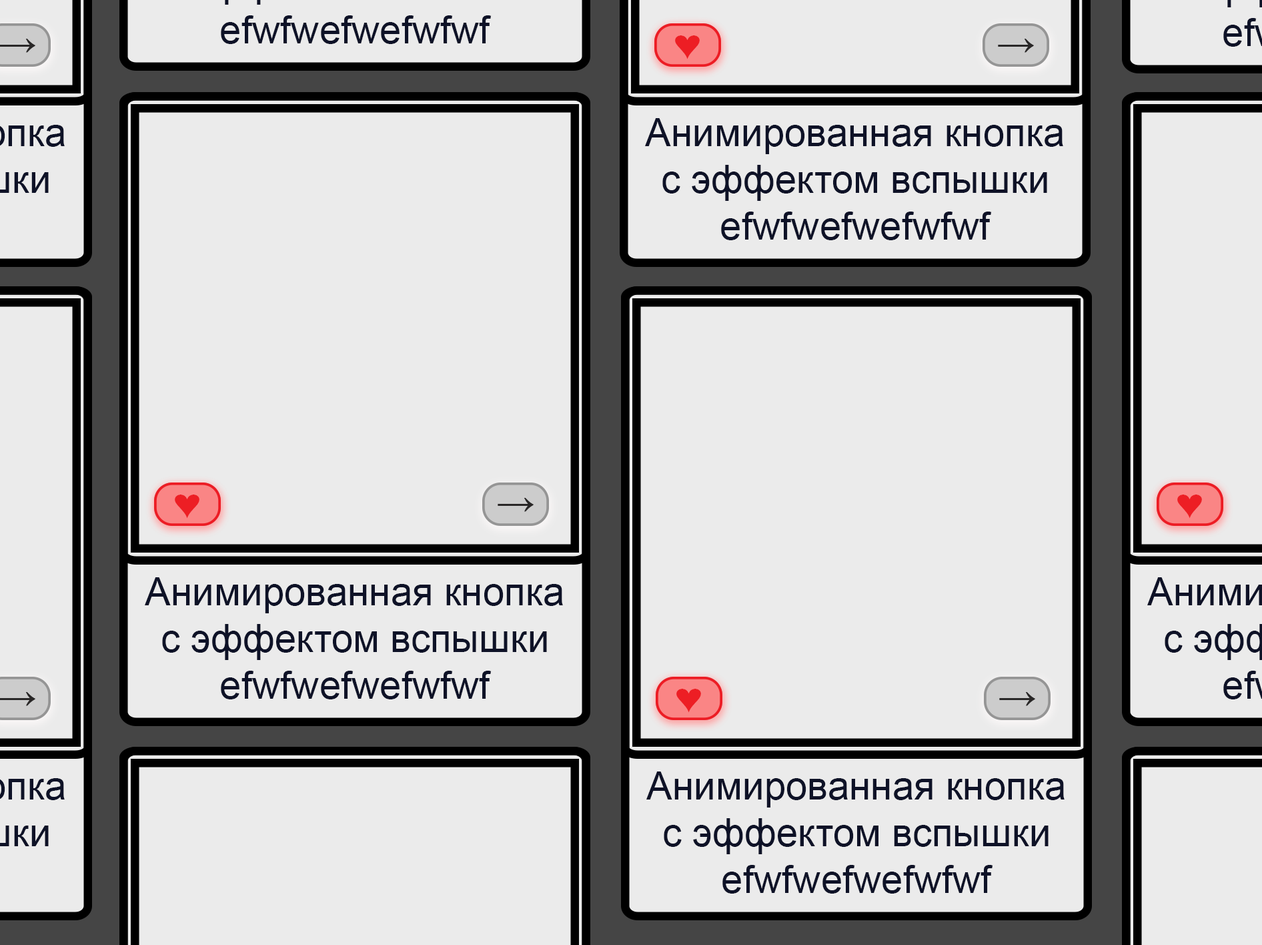
<style>
.page{position:relative;width:1262px;height:945px;background:#ebebeb}
.page>*{position:absolute;margin:0}
.t1{font:38.9px "ArialMT";color:#292727}
.t2{font:38.9px "ArialMT";color:#ed1e24;scale:1.19 1}
.t3{font:38.9px "ArialMT";color:#0e1227}
</style>
<div class="page">
<p class="t1" style="left:0px;top:39px;width:35px;height:14px">→</p>
<p class="t2" style="left:675px;top:35px;width:25px;height:24px">♥</p>
<p class="t2" style="left:675px;top:35px;width:25px;height:24px">♥</p>
<p class="t1" style="left:998px;top:39px;width:36px;height:14px">→</p>
<p class="t3" style="left:645px;top:118px;width:418px;height:122px;text-align:center">Анимированная кнопка с эффектом вспышки<br>efwfwefwefwfwf</p>
<p class="t2" style="left:175px;top:494px;width:24px;height:24px">♥</p>
<p class="t2" style="left:175px;top:494px;width:24px;height:24px">♥</p>
<p class="t1" style="left:498px;top:498px;width:36px;height:14px">→</p>
<p class="t2" style="left:1178px;top:494px;width:24px;height:24px">♥</p>
<p class="t2" style="left:1178px;top:494px;width:24px;height:24px">♥</p>
<p class="t3" style="left:145px;top:577px;width:418px;height:122px;text-align:center">Анимированная кнопка с эффектом вспышки<br>efwfwefwefwfwf</p>
<p class="t2" style="left:676px;top:689px;width:25px;height:24px">♥</p>
<p class="t2" style="left:676px;top:689px;width:25px;height:24px">♥</p>
<p class="t1" style="left:0px;top:692px;width:35px;height:14px">→</p>
<p class="t1" style="left:999px;top:692px;width:36px;height:14px">→</p>
<p class="t3" style="left:646px;top:771px;width:419px;height:122px;text-align:center">Анимированная кнопка с эффектом вспышки<br>efwfwefwefwfwf</p>
</div>
